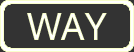
<style>
.page{position:relative;width:134px;height:52px;background:#333333}
.page>*{position:absolute;margin:0}
.t1{font:37.5px "NanumSquareOTF_acB";letter-spacing:-0.05em}
</style>
<div class="page">
<p class="t1" style="left:27px;top:12px;width:80px;height:28px">WAY</p>
</div>
